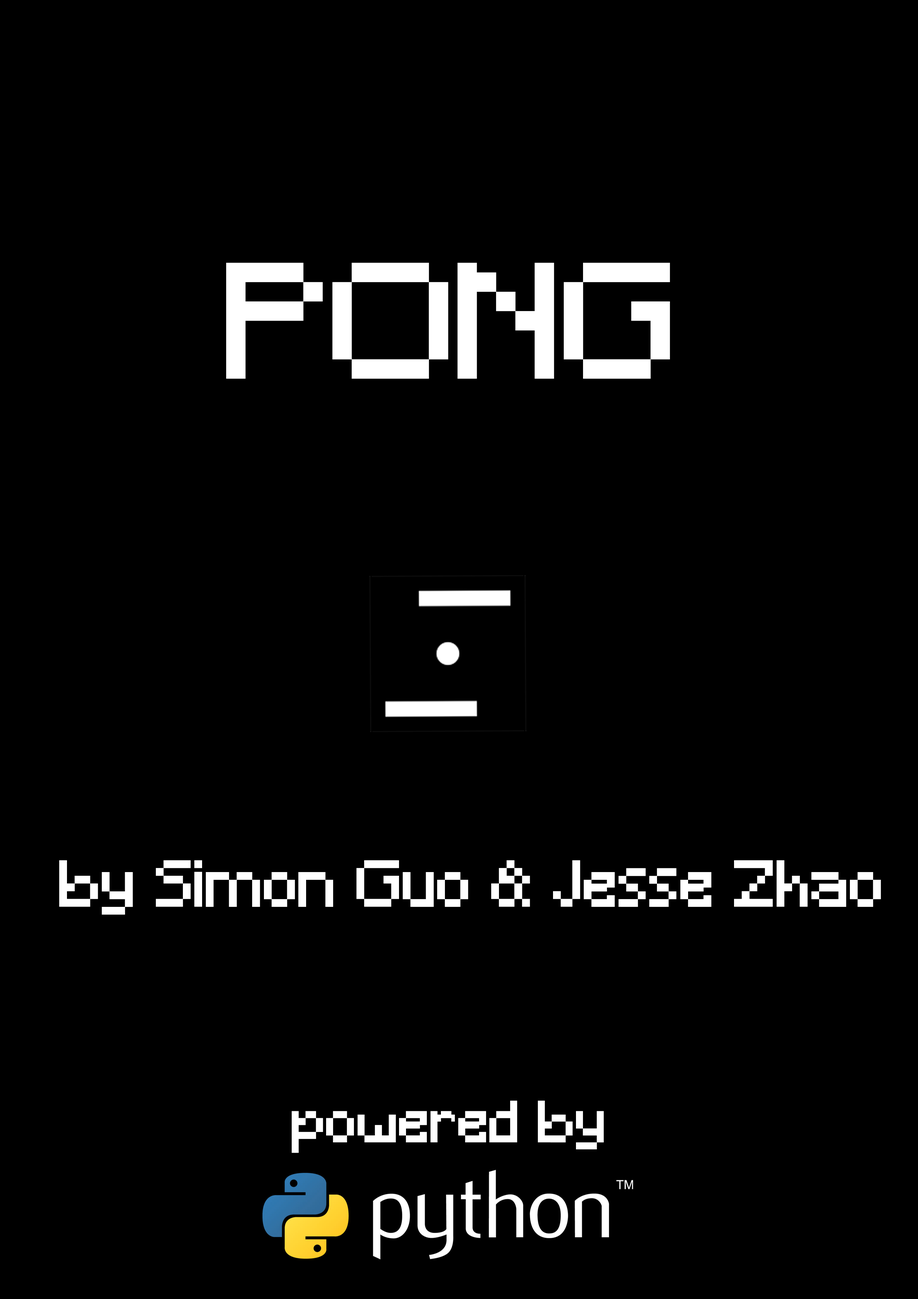
<style>
.page{position:relative;width:918px;height:1299px;background:#000000}
.page>*{position:absolute;margin:0}
.t1{font:154.3px "Minecraft";color:#ffffff}
.t2{font:61.7px "Minecraft";color:#ffffff}
.t3{font:55.5px "Minecraft";color:#ffffff}
</style>
<div class="page">
<p class="t1" style="left:226px;top:262px;width:444px;height:117px">PONG</p>
<p class="t2" style="left:59px;top:860px;width:822px;height:54px">by Simon Guo &amp; Jesse Zhao</p>
<p class="t3" style="left:292px;top:1100px;width:312px;height:53px">powered by</p>
</div>
